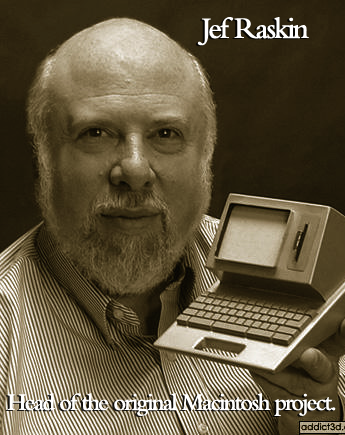
<style>
.page{position:relative;width:345px;height:435px}
.page>*{position:absolute;margin:0}
.t1{font:31.2px "BemboMT-SemiBold";letter-spacing:-0.08em;color:#ffffff;scale:0.95 1}
.t2{font:25px "BemboMT-SemiBold";letter-spacing:-0.08em;color:#ffffff;scale:0.95 1}
</style>
<div class="page">
<p class="t1" style="left:197px;top:17px;width:112px;height:29px">Jef Raskin</p>
<p class="t2" style="left:7px;top:393px;width:329px;height:23px">Head of the original Macintosh project.</p>
</div>
